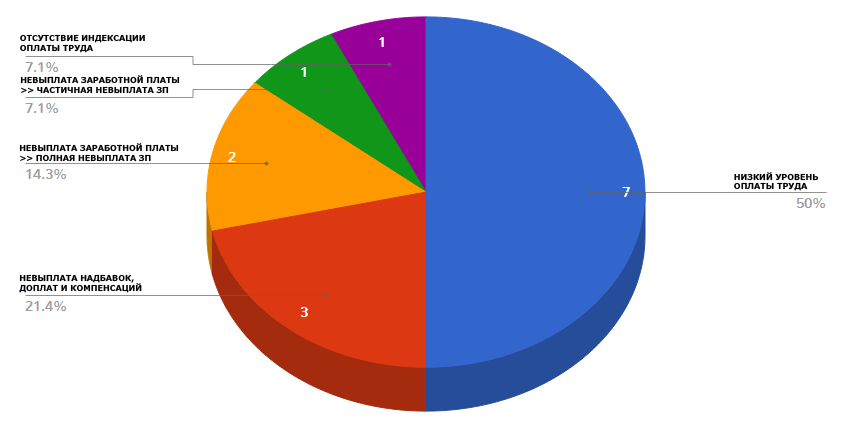
<style>
.page{position:relative;width:854px;height:436px;background:#ffffff}
.page>*{position:absolute;margin:0}
.t1{font:8px "Verdana-Bold";color:#000000}
</style>
<div class="page">
<p class="t1" style="left:20px;top:34px;width:125px;height:19px">ОТСУТСТВИЕ ИНДЕКСАЦИИ<br>ОПЛАТЫ ТРУДА</p>
<p class="t1" style="left:20px;top:75px;width:160px;height:19px">НЕВЫПЛАТА ЗАРАБОТНОЙ ПЛАТЫ<br>&gt;&gt; ЧАСТИЧНАЯ НЕВЫПЛАТА ЗП</p>
<p class="t1" style="left:19px;top:143px;width:160px;height:19px">НЕВЫПЛАТА ЗАРАБОТНОЙ ПЛАТЫ<br>&gt;&gt; ПОЛНАЯ НЕВЫПЛАТА ЗП</p>
<p class="t1" style="left:734px;top:172px;width:84px;height:19px">НИЗКИЙ УРОВЕНЬ<br>ОПЛАТЫ ТРУДА</p>
<p class="t1" style="left:19px;top:274px;width:123px;height:19px">НЕВЫПЛАТА НАДБАВОК,<br>ДОПЛАТ И КОМПЕНСАЦИЙ</p>
</div>
